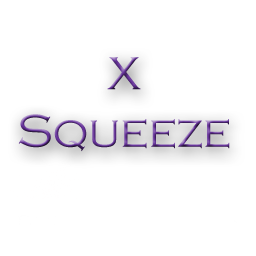
<style>
.page{position:relative;width:256px;height:256px;background:#ffffff}
.page>*{position:absolute;margin:0}
.t1{font:48px "CopperplateGothic-Light"}
</style>
<div class="page">
<p class="t1" style="left:18px;top:57px;width:212px;height:95px;text-align:center">X<br>Squeeze</p>
</div>
